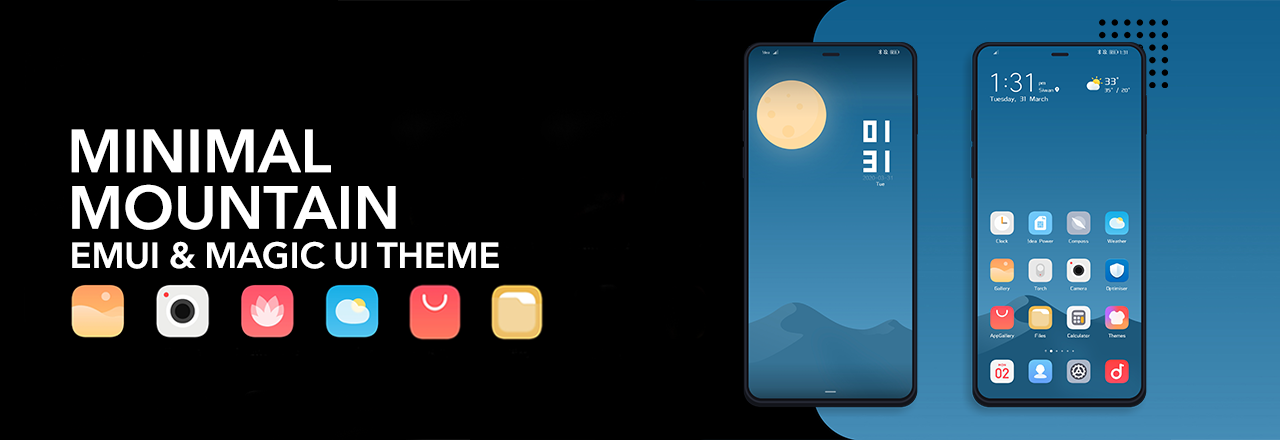
<style>
.page{position:relative;width:1280px;height:440px;background:#000000}
.page>*{position:absolute;margin:0}
.t1{font:60px "AvenirNext-DemiBold";color:#ffffff}
.t2{font:35.8px "AvenirNext-DemiBold";color:#ffffff}
</style>
<div class="page">
<p class="t1" style="left:71px;top:129px;width:260px;height:44px">MINIMAL</p>
<p class="t1" style="left:72px;top:184px;width:324px;height:46px">MOUNTAIN</p>
<p class="t2" style="left:72px;top:241px;width:427px;height:28px">EMUI &amp; MAGIC UI THEME</p>
</div>
